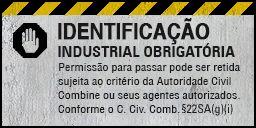
<style>
.page{position:relative;width:256px;height:128px}
.page>*{position:absolute;margin:0}
.t1{font:22.1px "Helvetica-Bold";letter-spacing:-0.02em;color:#181818;font-weight:bold;scale:0.88 1}
.t2{font:14.6px "ZurichBT-BoldCondensed";letter-spacing:-0.015em;color:#181818;scale:1.13 1}
.t3{font:15px "Isra-Regular";letter-spacing:0.005em;color:#181818;scale:1.13 1}
</style>
<div class="page">
<p class="t1" style="left:58px;top:18px;width:152px;height:27px">IDENTIFICAÇÃO</p>
<p class="t2" style="left:58px;top:43px;width:177px;height:14px">INDUSTRIAL OBRIGATÓRIA</p>
<p class="t3" style="left:59px;top:63px;width:181px;height:10px">Permissão para passar pode ser retida</p>
<p class="t3" style="left:58px;top:77px;width:173px;height:10px">sujeita ao critério da Autoridade Civil</p>
<p class="t3" style="left:58px;top:91px;width:182px;height:10px">Combine ou seus agentes autorizados.</p>
<p class="t3" style="left:58px;top:105px;width:122px;height:8px">Conforme o C. Civ. Comb.</p>
</div>
